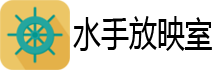
<style>
.page{position:relative;width:215px;height:70px;background:#ffffff}
.page>*{position:absolute;margin:0}
.t1{font:35.6px "MicrosoftYaHei";color:#000000;scale:0.78 1}
</style>
<div class="page">
<p class="t1" style="left:73px;top:16px;width:139px;height:35px">水手放映室</p>
</div>
